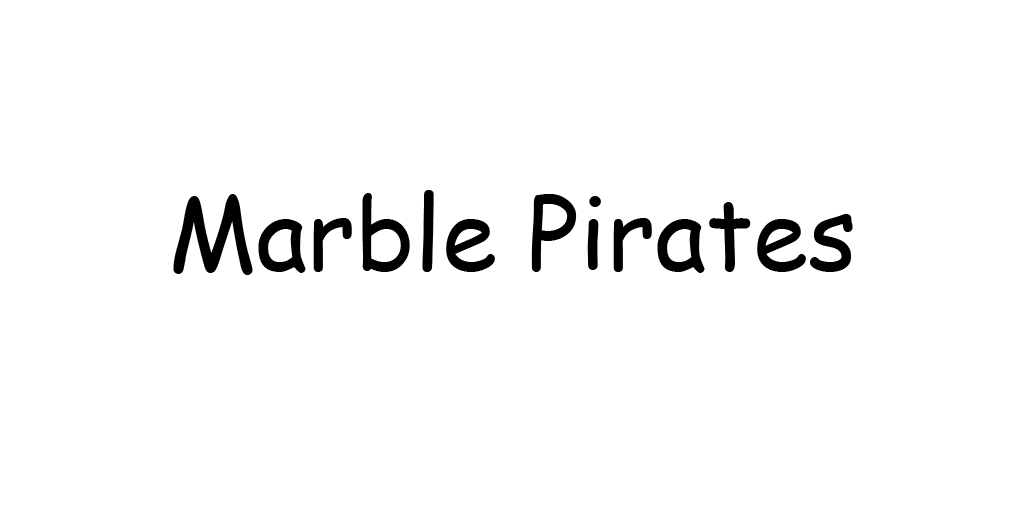
<style>
.page{position:relative;width:1024px;height:512px;background:#ffffff}
.page>*{position:absolute;margin:0}
.t1{font:100px "ComicSansMS";color:#000000}
</style>
<div class="page">
<p class="t1" style="left:173px;top:190px;width:680px;height:85px">Marble Pirates</p>
</div>
